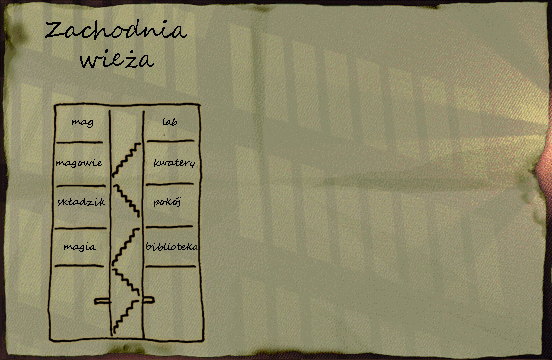
<style>
.page{position:relative;width:552px;height:360px;background:#8c8c6c}
.page>*{position:absolute;margin:0}
.t1{font:24px "SegoeScript";color:#000000}
.t2{font:10px "SegoeScript";color:#000000}
</style>
<div class="page">
<p class="t1" style="left:45px;top:19px;width:142px;height:49px;text-align:center">Zachodnia<br>wieża</p>
<p class="t2" style="left:72px;top:120px;width:21px;height:8px">mag</p>
<p class="t2" style="left:163px;top:118px;width:14px;height:8px">lab</p>
<p class="t2" style="left:56px;top:159px;width:46px;height:9px">magowie</p>
<p class="t2" style="left:154px;top:159px;width:41px;height:9px">kwatery</p>
<p class="t2" style="left:58px;top:198px;width:47px;height:8px">składzik</p>
<p class="t2" style="left:154px;top:197px;width:27px;height:10px">pokój</p>
<p class="t2" style="left:64px;top:242px;width:32px;height:10px">magia</p>
<p class="t2" style="left:146px;top:242px;width:53px;height:9px">biblioteka</p>
</div>
